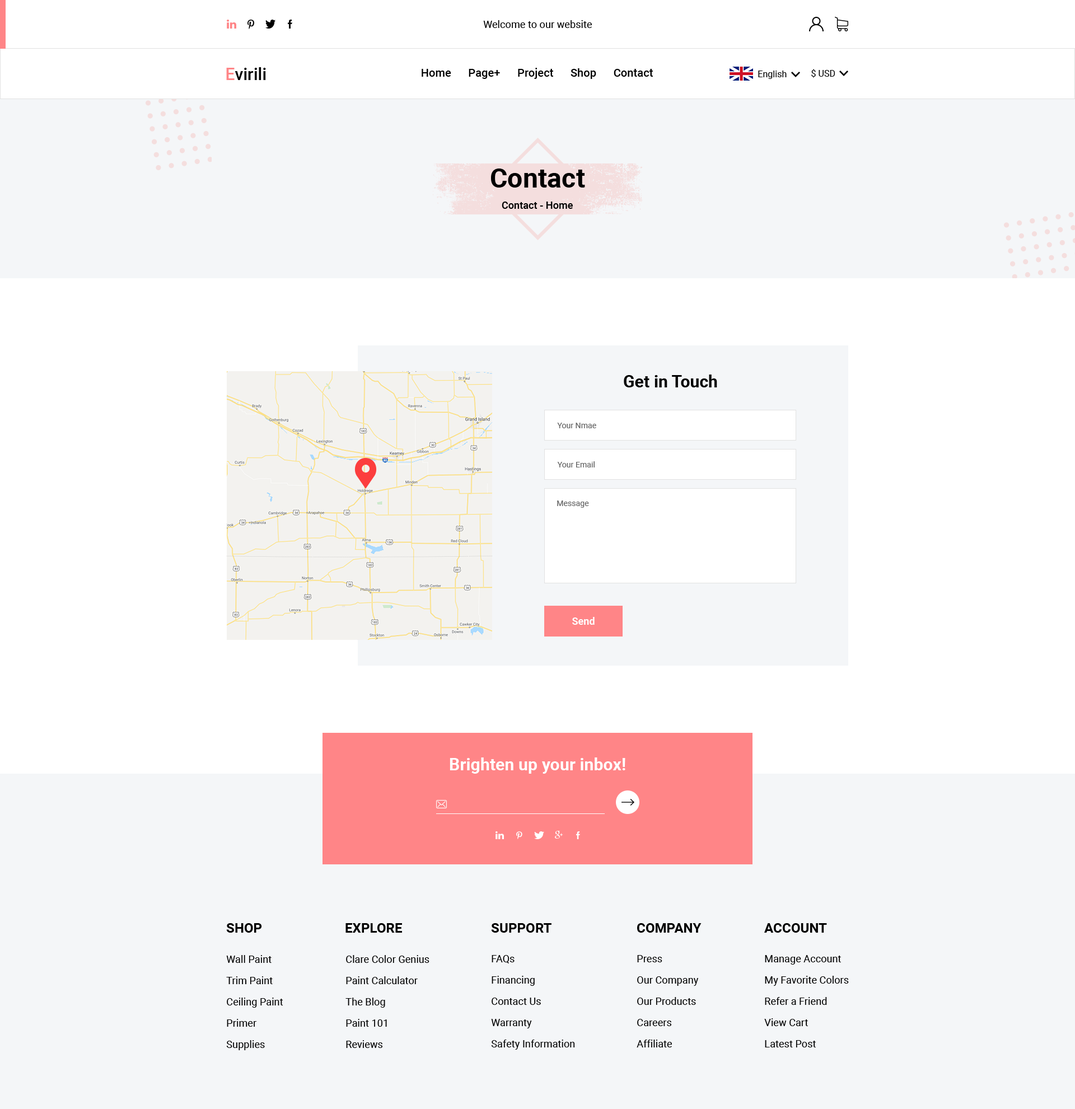
<style>
.page{position:relative;width:1075px;height:1109px;background:#f4f6f8}
.page>*{position:absolute;margin:0}
.t1{font:10.1px "Roboto-Regular";letter-spacing:0.005em;color:#000000}
.t2{font:16.8px "Roboto-Medium";letter-spacing:0.005em;color:#000000}
.t3{font:16.8px "Roboto-Medium";letter-spacing:0.005em;color:#ff8587}
.t4{font:11.2px "Roboto-Medium";letter-spacing:0.005em;color:#000000}
.t5{font:9px "Roboto-Regular";letter-spacing:0.005em;color:#000000}
.t6{font:26.9px "Roboto-Bold";letter-spacing:0.005em;color:#000000}
.t7{font:10.1px "Roboto-Medium";letter-spacing:0.005em;color:#000000}
.t8{font:16.8px "Roboto-Bold";letter-spacing:0.005em;color:#000000}
.t9{font:7.8px "Roboto-Regular";letter-spacing:0.005em;color:#666666}
.t10{font:10.1px "Roboto-Bold";letter-spacing:0.005em;color:#ffffff}
.t11{font:16.8px "Roboto-Bold";letter-spacing:0.005em;color:#ffffff}
.t12{font:13.4px "Roboto-Bold";letter-spacing:0.005em;color:#000000}
.t13{font:10.1px/21.3px "Roboto-Regular";letter-spacing:0.005em;color:#000000}
</style>
<div class="page">
<p class="t1" style="left:483px;top:20px;width:109px;height:8px">Welcome to our website</p>
<p class="t2" style="left:226px;top:67px;width:40px;height:13px"><span class="t3">E</span>virili</p>
<p class="t4" style="left:422px;top:68px;width:231px;height:11px">Home      Page+      Project      Shop      Contact</p>
<p class="t5" style="left:758px;top:71px;width:29px;height:8px">English</p>
<p class="t5" style="left:811px;top:69px;width:24px;height:9px">$ USD</p>
<p class="t6" style="left:491px;top:169px;width:94px;height:19px">Contact</p>
<p class="t7" style="left:502px;top:202px;width:71px;height:7px">Contact - Home</p>
<p class="t8" style="left:624px;top:375px;width:93px;height:12px">Get in Touch</p>
<p class="t9" style="left:557px;top:423px;width:39px;height:5px">Your Nmae</p>
<p class="t9" style="left:557px;top:461px;width:38px;height:7px">Your Email</p>
<p class="t9" style="left:557px;top:501px;width:32px;height:7px">Message</p>
<p class="t10" style="left:572px;top:617px;width:23px;height:8px">Send</p>
<p class="t11" style="left:450px;top:758px;width:175px;height:16px">Brighten up your inbox!</p>
<p class="t12" style="left:226px;top:923px;width:36px;height:10px">SHOP</p>
<p class="t12" style="left:345px;top:923px;width:57px;height:10px">EXPLORE</p>
<p class="t12" style="left:491px;top:923px;width:61px;height:10px">SUPPORT</p>
<p class="t12" style="left:637px;top:923px;width:65px;height:10px">COMPANY</p>
<p class="t12" style="left:764px;top:923px;width:63px;height:10px">ACCOUNT</p>
<p class="t13" style="left:226px;top:955px;width:57px;height:95px">Wall Paint<br>Trim Paint<br>Ceiling Paint<br>Primer<br>Supplies</p>
<p class="t13" style="left:345px;top:955px;width:84px;height:93px">Clare Color Genius<br>Paint Calculator<br>The Blog<br>Paint 101<br>Reviews</p>
<p class="t13" style="left:491px;top:955px;width:84px;height:95px">FAQs<br>Financing<br>Contact Us<br>Warranty<br>Safety Information</p>
<p class="t13" style="left:637px;top:955px;width:61px;height:93px">Press<br>Our Company<br>Our Products<br>Careers<br>Affiliate</p>
<p class="t13" style="left:764px;top:955px;width:85px;height:93px">Manage Account<br>My Favorite Colors<br>Refer a Friend<br>View Cart<br>Latest Post</p>
</div>
